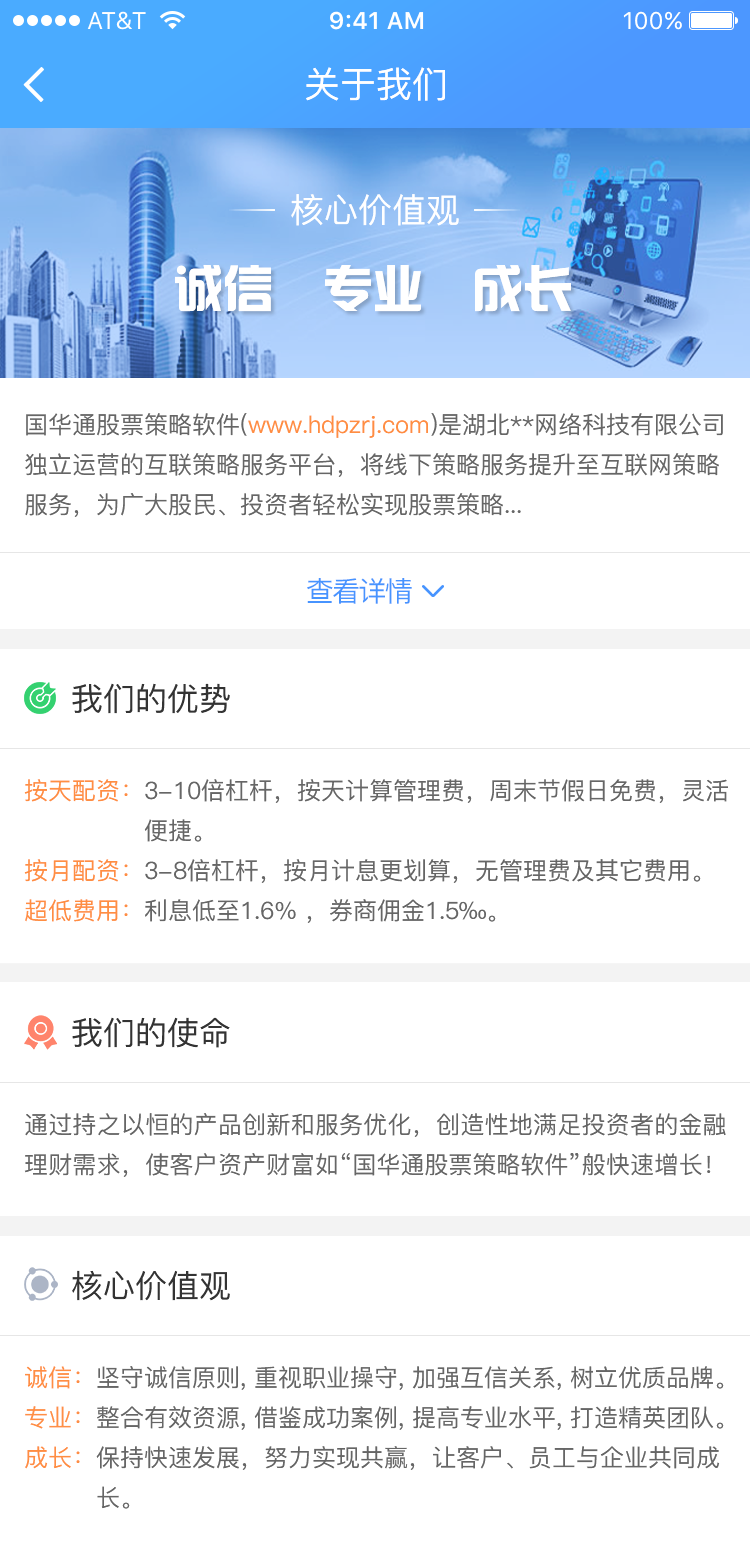
<style>
.page{position:relative;width:750px;height:1544px;background:#ffffff}
.page>*{position:absolute;margin:0}
.t1{font:36px "PingFang-SC-Medium";color:#ffffff}
.t2{font:34px "PingFang-SC-Medium";color:#ffffff}
.t3{font:50px "hzgb";color:#ffffff}
.t4{font:24px/40px "PingFang-SC-Medium";color:#666666}
.t5{font:24px/40px "PingFang-SC-Medium";color:#ff8e42}
.t6{font:28px "PingFang-SC-Medium";letter-spacing:-0.06em;color:#4794ff}
.t7{font:32px "PingFang-SC-Medium";color:#333333}
.t8{font:24px/40px "PingFang-SC-Medium";letter-spacing:0.01em;color:#666666}
.t9{font:24px/40px "PingFang-SC-Medium";color:#ff8f44}
</style>
<div class="page">
<p class="t1" style="left:306px;top:67px;width:139px;height:34px">关于我们</p>
<p class="t2" style="left:291px;top:194px;width:168px;height:32px">核心价值观</p>
<p class="t3" style="left:175px;top:265px;width:396px;height:47px">诚信  专业  成长</p>
<p class="t4" style="left:25px;top:413px;width:698px;height:104px">国华通股票策略软件(<span class="t5">www.hdpzrj.com</span>)是湖北**网络科技有限公司独立运营的互联策略服务平台，将线下策略服务提升至互联网策略服务，为广大股民、投资者轻松实现股票策略...</p>
<p class="t6" style="left:307px;top:578px;width:105px;height:26px">查看详情</p>
<p class="t7" style="left:72px;top:683px;width:158px;height:31px">我们的优势</p>
<p class="t4" style="left:24px;top:779px;width:704px;height:144px"><span class="t5">按天配资：</span>3-10倍杠杆，按天计算管理费，周末节假日免费，灵活<br>               便捷。<br><span class="t5">按月配资：</span>3-8倍杠杆，按月计息更划算，无管理费及其它费用。<br><span class="t5">超低费用：</span>利息低至1.6% ，券商佣金1.5‰。</p>
<p class="t7" style="left:72px;top:1017px;width:158px;height:31px">我们的使命</p>
<p class="t8" style="left:24px;top:1113px;width:702px;height:64px">通过持之以恒的产品创新和服务优化，创造性地满足投资者的金融理财需求，使客户资产财富如“<span class="t4">国华通股票策略软件</span>”般快速增长！</p>
<p class="t7" style="left:72px;top:1270px;width:158px;height:31px">核心价值观</p>
<p class="t4" style="left:25px;top:1366px;width:699px;height:143px"><span class="t5">诚信：</span>坚守诚信原则, 重视职业操守, 加强互信关系, 树立优质品牌。<br><span class="t9">专业：</span>整合有效资源, 借鉴成功案例, 提高专业水平, 打造精英团队。<br><span class="t5">成长：</span>保持快速发展，努力实现共赢，让客户、员工与企业共同成     <br>         长。</p>
</div>
